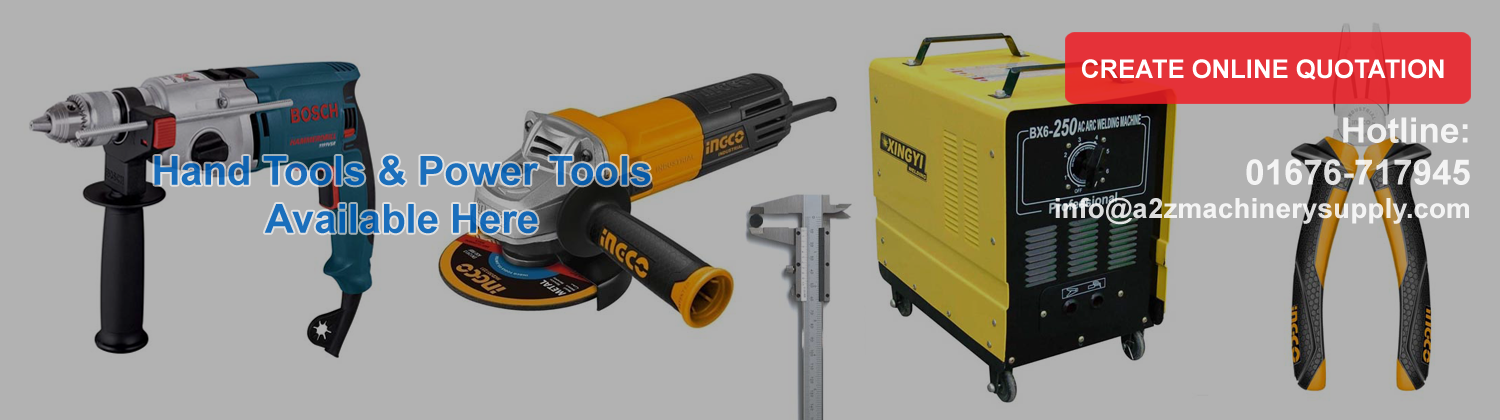
<style>
.page{position:relative;width:1500px;height:420px;background:#b2b2b2}
.page>*{position:absolute;margin:0}
.t1{font:25.6px "Arial-BoldMT";color:#ffffff}
.t2{font:28px "Arial-BoldMT";color:#ffffff}
.t3{font:35px "Arial-BoldMT";color:#ffffff}
.t4{font:40px "Arial-BoldMT";color:#196bb9}
</style>
<div class="page">
<p class="t1" style="left:1082px;top:59px;width:362px;height:21px">CREATE ONLINE QUOTATION</p>
<p class="t2" style="left:1055px;top:117px;width:415px;height:108px;text-align:right;opacity:0.85"><span class="t3">Hotline:<br>01676-717945<br></span>info@a2zmachinerysupply.com</p>
<p class="t4" style="left:154px;top:155px;width:497px;height:79px;text-align:center">Hand Tools &amp; Power Tools<br>Available Here</p>
</div>
